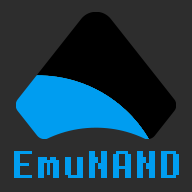
<style>
.page{position:relative;width:192px;height:192px;background:#2d2d2d}
.page>*{position:absolute;margin:0}
.t1{font:36px "BIG-SHOT";color:#009df0}
</style>
<div class="page">
<p class="t1" style="left:14px;top:151px;width:165px;height:27px">EmuNAND</p>
</div>
